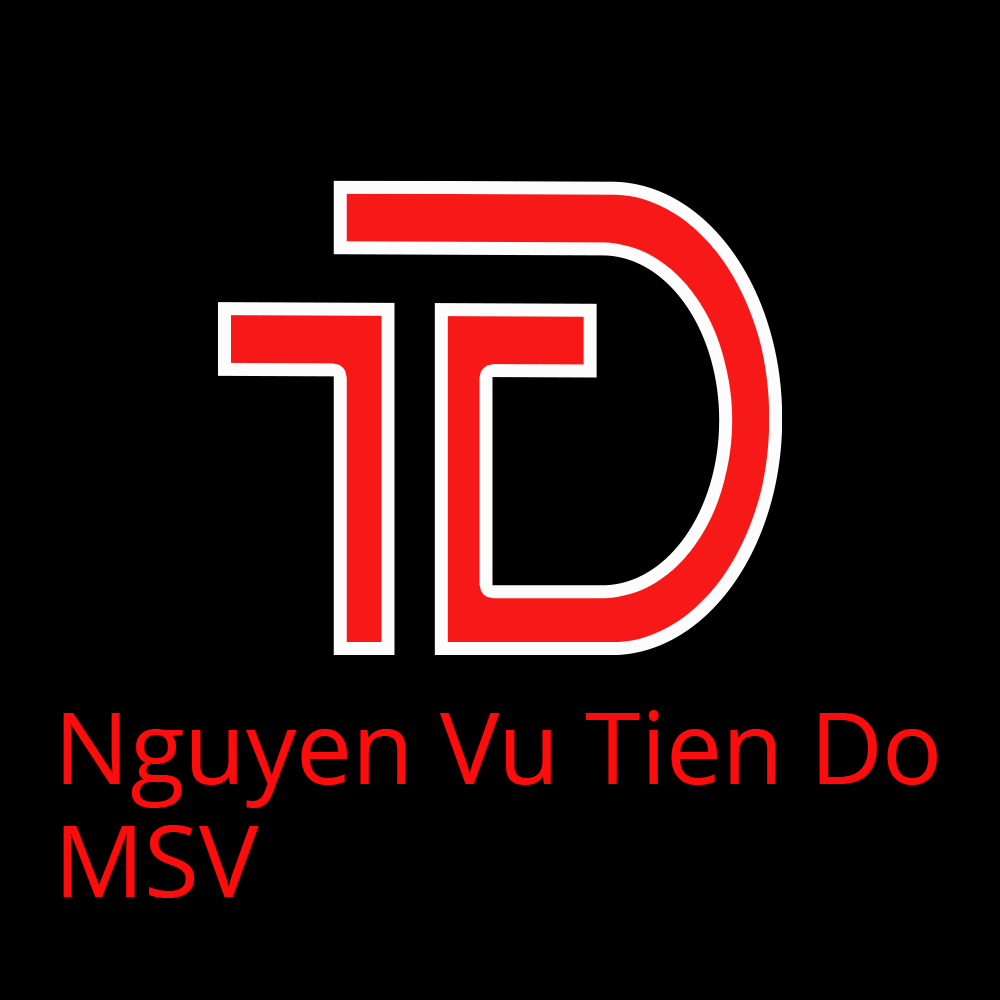
<style>
.page{position:relative;width:1000px;height:1000px;background:#000000}
.page>*{position:absolute;margin:0}
.t1{font:100px "OpenSans";color:#fc0d0d}
</style>
<div class="page">
<p class="t1" style="left:63px;top:710px;width:874px;height:98px">Nguyen Vu Tien Do</p>
<p class="t1" style="left:63px;top:825px;width:196px;height:73px">MSV</p>
</div>
